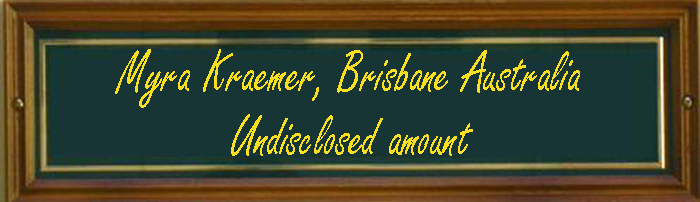
<style>
.page{position:relative;width:700px;height:202px;background:#173535}
.page>*{position:absolute;margin:0}
.t1{font:62.5px "FreestyleScript-Regular";letter-spacing:0.001em;color:#fade20;scale:0.8 1}
</style>
<div class="page">
<p class="t1" style="left:115px;top:49px;width:465px;height:107px;text-align:center">Myra Kraemer, Brisbane Australia<br>Undisclosed amount</p>
</div>
